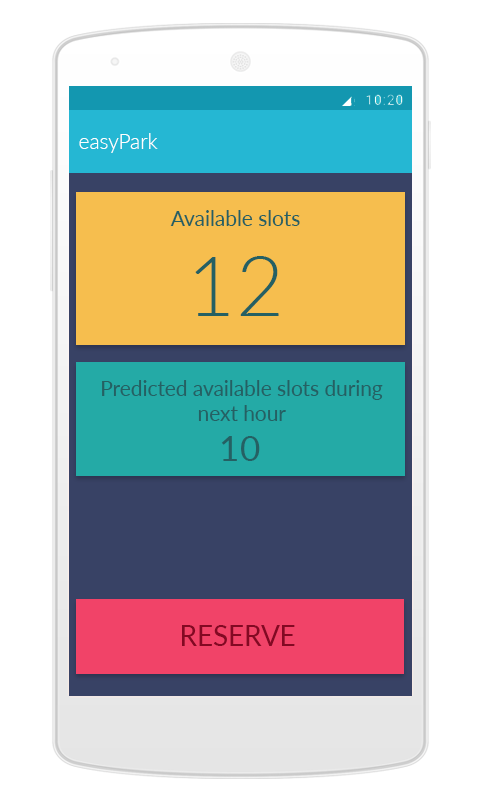
<style>
.page{position:relative;width:480px;height:800px;background:#ffffff}
.page>*{position:absolute;margin:0}
.t1{font:20.8px "Lato-Light";color:#ffffff}
.t2{font:20.8px "Lato-Regular";color:#256063}
.t3{font:83.3px "Lato-Light";color:#256063}
.t4{font:34.7px "Lato-Regular";color:#256063}
.t5{font:27.8px "Lato-Regular";color:#830923}
</style>
<div class="page">
<p class="t1" style="left:79px;top:133px;width:79px;height:20px">easyPark</p>
<p class="t2" style="left:170px;top:210px;width:130px;height:16px">Available slots</p>
<p class="t3" style="left:195px;top:256px;width:84px;height:60px">12</p>
<p class="t2" style="left:102px;top:380px;width:281px;height:41px;text-align:center">Predicted available slots during<br>next hour</p>
<p class="t4" style="left:221px;top:436px;width:39px;height:25px">10</p>
<p class="t5" style="left:182px;top:625px;width:113px;height:21px">RESERVE</p>
</div>
